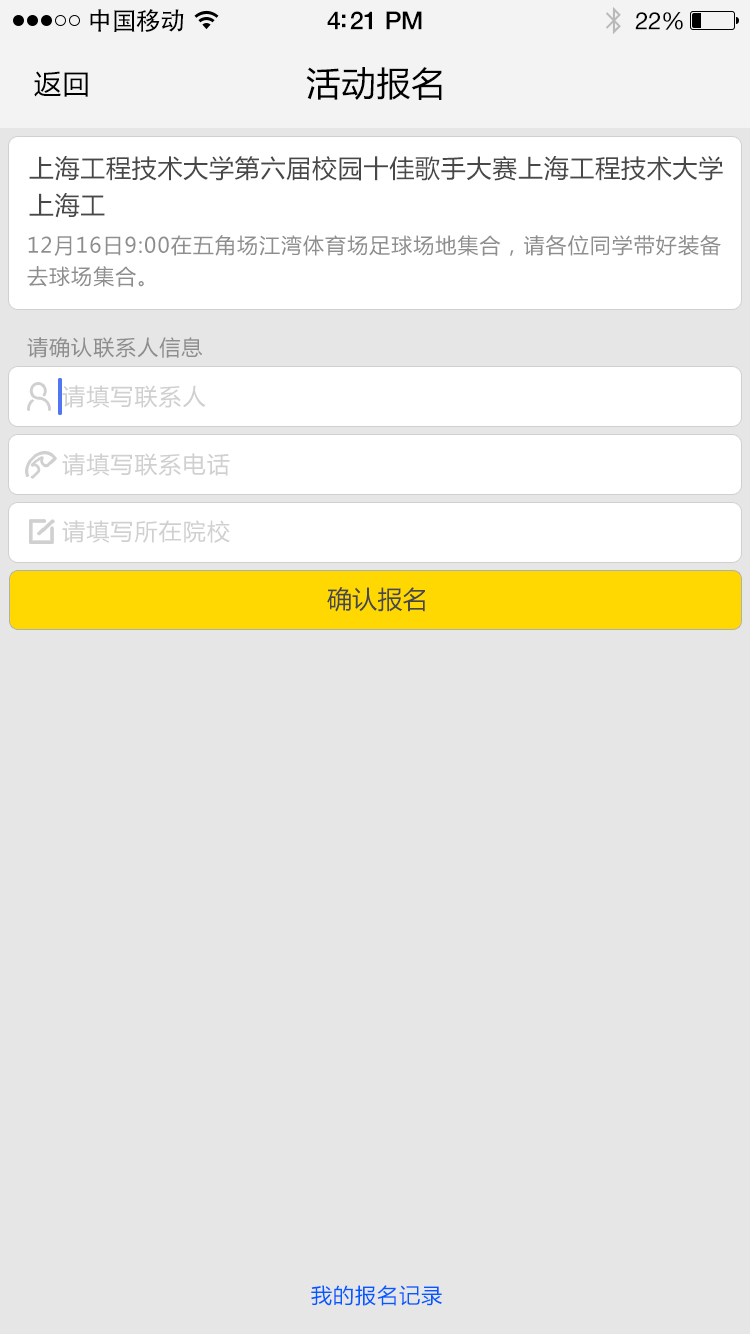
<style>
.page{position:relative;width:750px;height:1334px;background:#e6e6e6}
.page>*{position:absolute;margin:0}
.t1{font:25px "AdobeHeitiStd-Regular";letter-spacing:-0.025em;color:#000000}
.t2{font:25px "HelveticaNeue-Medium";letter-spacing:-0.02em;color:#000000}
.t3{font:24px "HelveticaNeue";letter-spacing:-0.02em;color:#000000}
.t4{font:27px "MicrosoftYaHei";letter-spacing:0.05em;color:#000000}
.t5{font:34px "MicrosoftYaHei";letter-spacing:0.03em;color:#000000}
.t6{font:25px "MicrosoftYaHei";letter-spacing:0.03em;color:#555555}
.t7{font:21px "MicrosoftYaHei";letter-spacing:0.05em;color:#8e8e8e}
.t8{font:23px "MicrosoftYaHei";letter-spacing:0.05em;color:#d0d0d0}
.t9{font:25px "MicrosoftYaHei";letter-spacing:0.01em;color:#555555}
.t10{font:21px "MicrosoftYaHei";letter-spacing:0.05em;color:#005aff}
</style>
<div class="page">
<p class="t1" style="left:90px;top:9px;width:94px;height:23px">中国移动</p>
<p class="t2" style="left:327px;top:11px;width:95px;height:19px">4:21 PM</p>
<p class="t3" style="left:635px;top:12px;width:48px;height:18px">22%</p>
<p class="t4" style="left:34px;top:71px;width:54px;height:26px">返回</p>
<p class="t5" style="left:306px;top:67px;width:136px;height:33px">活动报名</p>
<p class="t6" style="left:29px;top:156px;width:694px;height:25px">上海工程技术大学第六届校园十佳歌手大赛上海工程技术大学</p>
<p class="t6" style="left:29px;top:193px;width:76px;height:25px">上海工</p>
<p class="t7" style="left:28px;top:235px;width:693px;height:21px">12月16日9:00在五角场江湾体育场足球场地集合，请各位同学带好装备</p>
<p class="t7" style="left:27px;top:266px;width:117px;height:21px">去球场集合。</p>
<p class="t7" style="left:27px;top:337px;width:175px;height:21px">请确认联系人信息</p>
<p class="t8" style="left:62px;top:385px;width:144px;height:23px">请填写联系人</p>
<p class="t8" style="left:62px;top:453px;width:168px;height:23px">请填写联系电话</p>
<p class="t8" style="left:62px;top:520px;width:168px;height:23px">请填写所在院校</p>
<p class="t9" style="left:327px;top:587px;width:98px;height:25px">确认报名</p>
<p class="t10" style="left:311px;top:1285px;width:131px;height:21px">我的报名记录</p>
</div>
